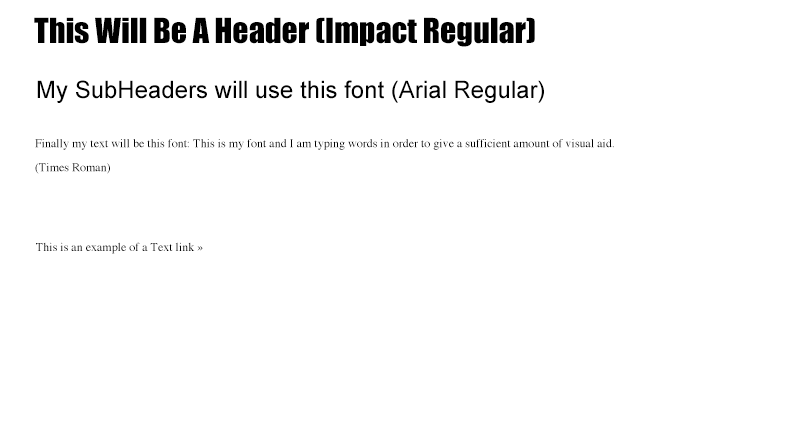
<style>
.page{position:relative;width:801px;height:436px;background:#ffffff}
.page>*{position:absolute;margin:0}
.t1{font:32px "Impact";color:#000000}
.t2{font:24px "ArialMT";color:#000000}
.t3{font:12px/24px "Times-Roman";color:#000000}
.t4{font:12px "Times-Roman";color:#000000}
</style>
<div class="page">
<p class="t1" style="left:34px;top:17px;width:501px;height:30px">This Will Be A Header (Impact Regular)</p>
<p class="t2" style="left:37px;top:80px;width:507px;height:23px">My SubHeaders will use this font (Arial Regular)</p>
<p class="t3" style="left:35px;top:139px;width:579px;height:35px">Finally my text will be this font: This is my font and I am typing words in order to give a sufficient amount of visual aid. (Times Roman)</p>
<p class="t4" style="left:36px;top:242px;width:167px;height:12px">This is an example of a Text link »</p>
</div>
